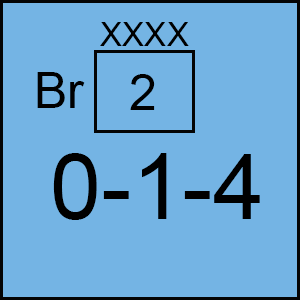
<style>
.page{position:relative;width:300px;height:300px;background:#74b4e4}
.page>*{position:absolute;margin:0}
.t1{font:33.3px "ArialMT";color:#000000}
.t2{font:50px "ArialMT";color:#000000}
.t3{font:91.7px "ArialMT";color:#000000}
</style>
<div class="page">
<p class="t1" style="left:100px;top:22px;width:89px;height:24px">XXXX</p>
<p class="t2" style="left:37px;top:72px;width:48px;height:36px">Br</p>
<p class="t2" style="left:130px;top:74px;width:25px;height:36px">2</p>
<p class="t3" style="left:53px;top:153px;width:207px;height:67px">0-1-4</p>
</div>
